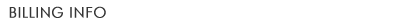
<style>
.page{position:relative;width:400px;height:24px;background:#ffffff}
.page>*{position:absolute;margin:0}
.t1{font:14.7px "FuturaBT-Light";letter-spacing:0.025em;color:#363636;text-transform:uppercase;font-weight:bold}
</style>
<div class="page">
<p class="t1" style="left:9px;top:6px;width:97px;height:12px">BILLING INFO</p>
</div>
